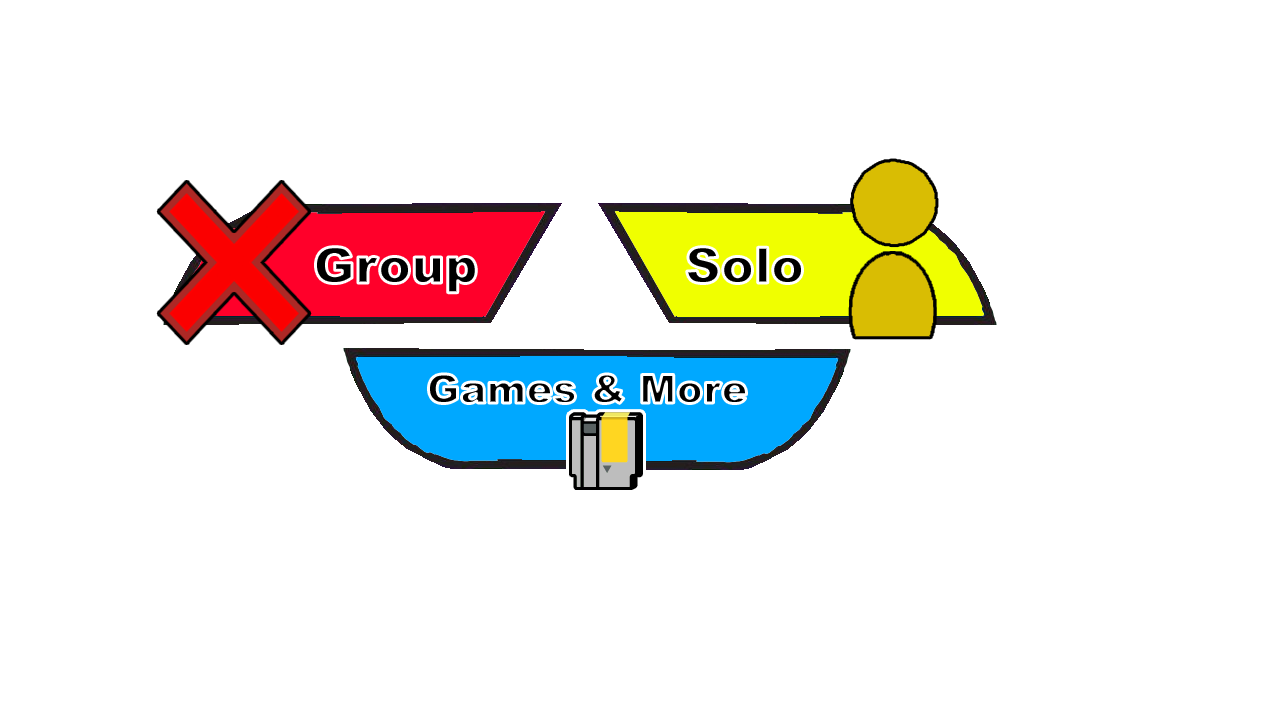
<style>
.page{position:relative;width:1280px;height:720px;background:#ffffff}
.page>*{position:absolute;margin:0}
.t1{font:50px "Arial-Black"}
.t2{font:50px "Arial-Black";color:#000000}
.t3{font:39.7px "Arial-Black"}
</style>
<div class="page">
<p class="t1" style="left:315px;top:246px;width:162px;height:47px">Group</p>
<p class="t2" style="left:686px;top:246px;width:117px;height:38px">Solo</p>
<p class="t3" style="left:428px;top:374px;width:319px;height:30px">Games &amp; More</p>
</div>
